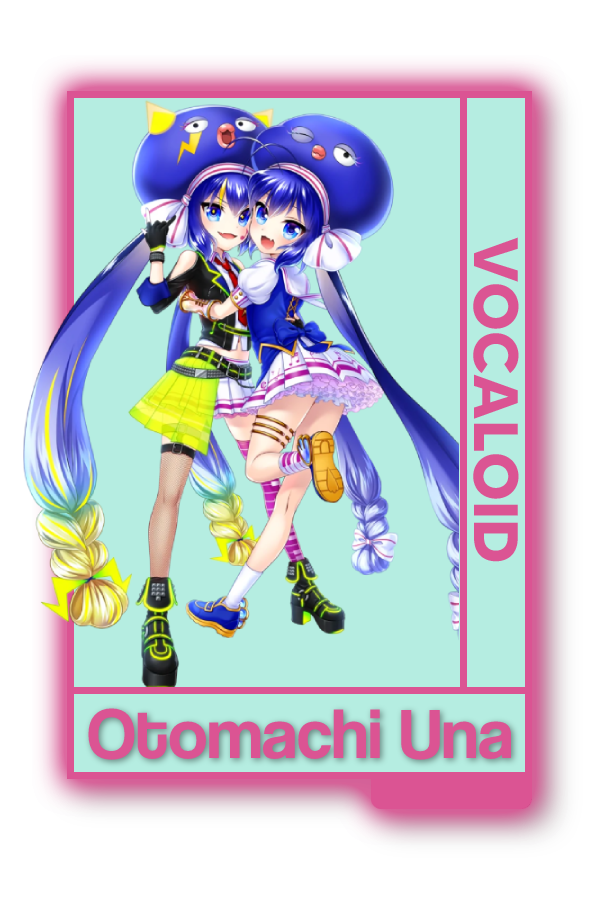
<style>
.page{position:relative;width:600px;height:900px;background:#b5ede1}
.page>*{position:absolute;margin:0}
.t1{font:62.5px "MADETOMMY-Bold";color:#db5493}
.t2{font:72.3px "CoolveticaRg-Regular";color:#db5493}
</style>
<div class="page">
<p class="t1" style="left:473px;top:237px;width:46px;height:325px;rotate:90deg">VOCALOID</p>
<p class="t2" style="left:88px;top:708px;width:423px;height:52px">Otomachi Una</p>
</div>
